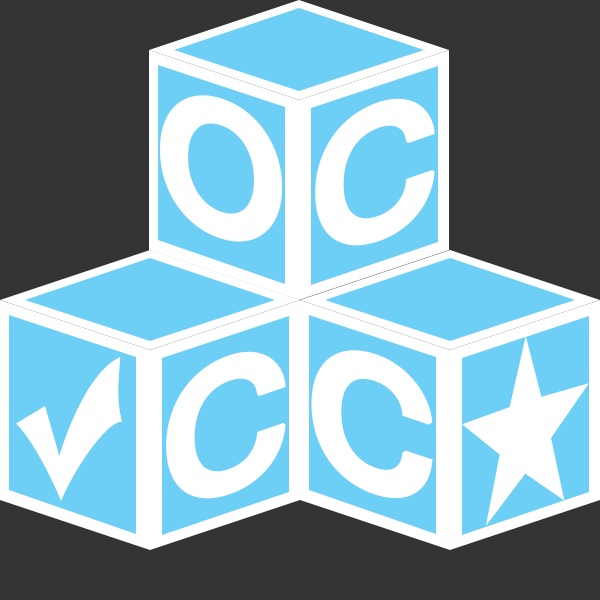
<style>
.page{position:relative;width:600px;height:600px;background:#333333}
.page>*{position:absolute;margin:0}
.t1{font:176.8px "Kartika-Bold";color:#ffffff;font-weight:bold}
.t2{font:176.8px "Kartika-Bold";color:#ffffff;font-weight:bold;scale:1.06 1}
.t3{font:176.8px "Kartika-Bold";color:#ffffff;font-weight:bold;scale:1.05 1}
</style>
<div class="page">
<p class="t1" style="left:160px;top:95px;width:123px;height:147px;rotate:18deg">O</p>
<p class="t2" style="left:315px;top:98px;width:120px;height:148px;rotate:-19deg">C</p>
<p class="t2" style="left:166px;top:351px;width:120px;height:148px;rotate:-19deg">C</p>
<p class="t3" style="left:311px;top:350px;width:122px;height:149px;rotate:19deg">C</p>
</div>
